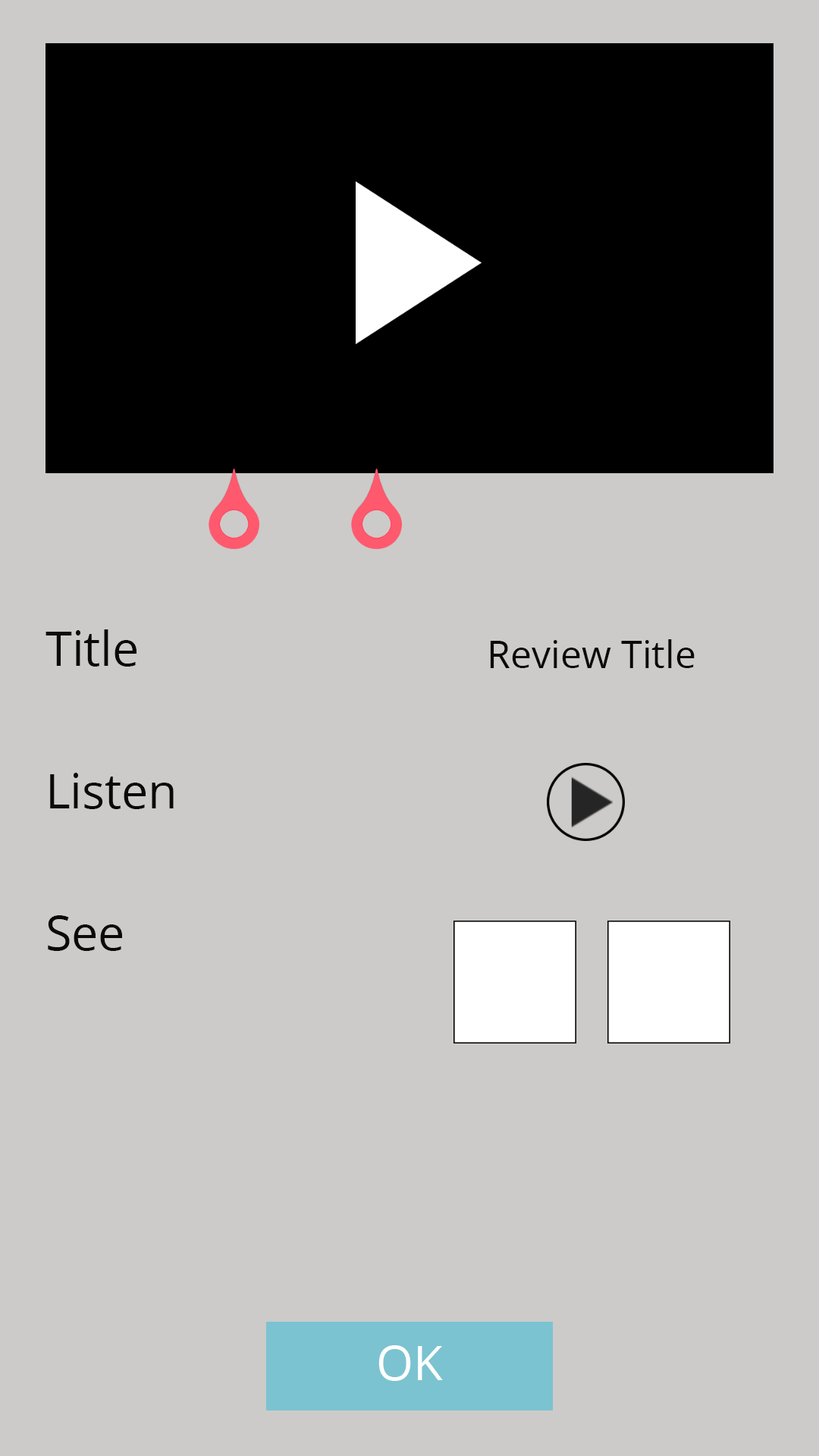
<style>
.page{position:relative;width:819px;height:1456px;background:#cccbc9}
.page>*{position:absolute;margin:0}
.t1{font:47.4px/142.2px "OpenSans";color:#0a0a0a}
.t2{font:37.9px "OpenSans";color:#0a0a0a}
.t3{font:47.4px "OpenSans";color:#ffffff}
</style>
<div class="page">
<p class="t1" style="left:45px;top:629px;width:129px;height:322px">Title<br>Listen<br>See</p>
<p class="t2" style="left:490px;top:639px;width:205px;height:29px">Review Title</p>
<p class="t3" style="left:378px;top:1345px;width:65px;height:36px">OK</p>
</div>
